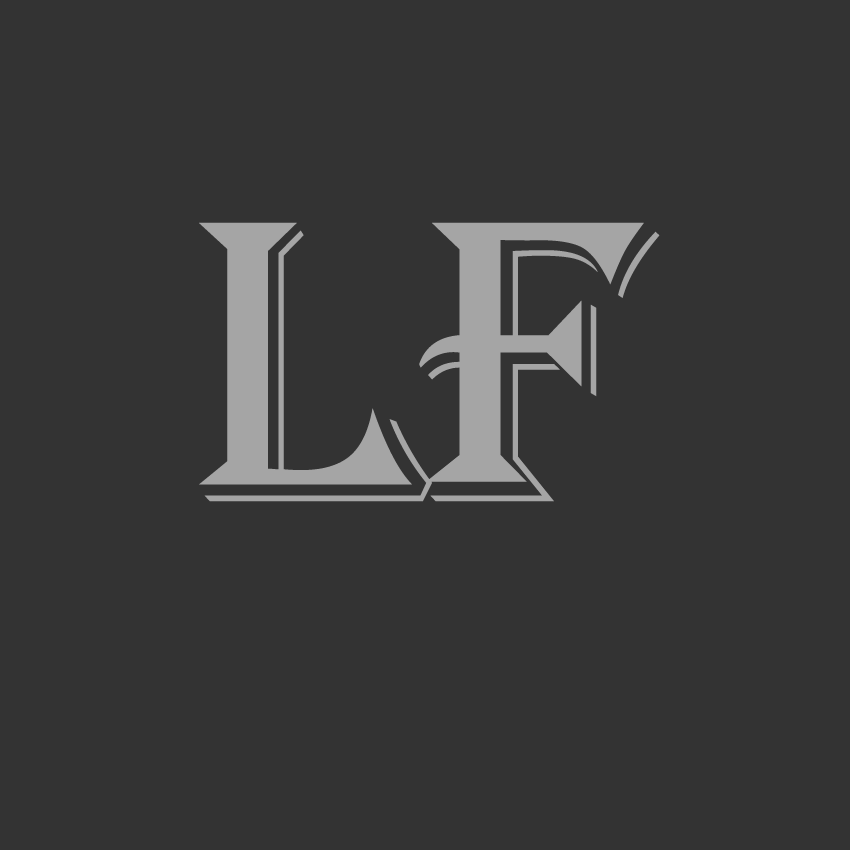
<style>
.page{position:relative;width:850px;height:850px;background:#333333}
.page>*{position:absolute;margin:0}
.t1{font:417.5px "Algerian";color:#a5a5a5}
</style>
<div class="page">
<p class="t1" style="left:199px;top:222px;width:461px;height:280px">LF</p>
</div>
